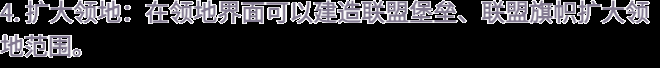
<style>
.page{position:relative;width:660px;height:68px;background:#000000}
.page>*{position:absolute;margin:0}
.t1{font:24px/34px "WebPSD-18463539-0-Regular";color:#837a91;font-weight:bold}
</style>
<div class="page">
<p class="t1" style="left:0px;top:0px;width:660px;height:68px">4. 扩大领地：在领地界面可以建造联盟堡垒、联盟旗帜扩大领<br>地范围。</p>
</div>
